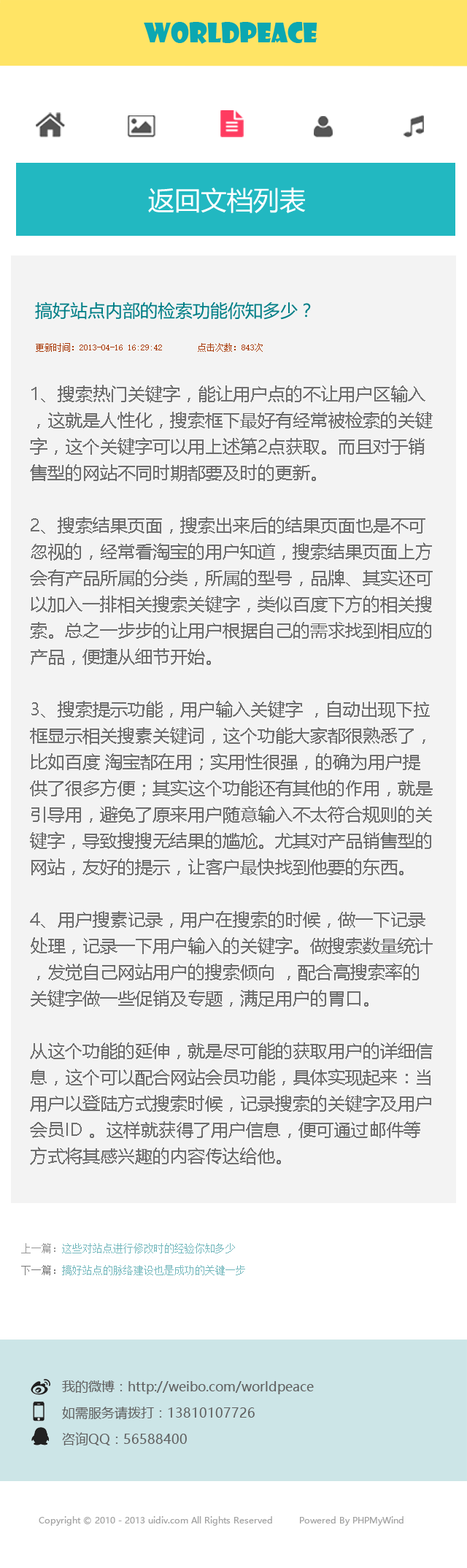
<style>
.page{position:relative;width:467px;height:1568px;background:#f3f3f3}
.page>*{position:absolute;margin:0}
.t1{font:26.3px "ShowcardGothic-Reg";color:#0ba7b1}
.t2{font:26.3px "MicrosoftYaHei";color:#ffffff}
.t3{font:17.5px "MicrosoftYaHei";color:#007e86}
.t4{font:8.8px "SimSun";color:#a93c0b}
.t5{font:17.5px/26.3px "MicrosoftYaHei";color:#6e6e6e}
.t6{font:10.2px/21.9px "SimSun";color:#72b7bc}
.t7{font:10.2px/21.9px "SimSun";color:#959595}
.t8{font:10.2px/21.9px "SimSun";color:#787878}
.t9{font:13.1px/26.3px "MicrosoftYaHei";color:#616161}
.t10{font:8.8px "MicrosoftYaHei";color:#a2a2a2}
</style>
<div class="page">
<p class="t1" style="left:144px;top:22px;width:174px;height:22px">worldpeace</p>
<p class="t2" style="left:148px;top:187px;width:158px;height:26px">返回文档列表</p>
<p class="t3" style="left:35px;top:301px;width:276px;height:19px">搞好站点内部的检索功能你知多少？</p>
<p class="t4" style="left:36px;top:343px;width:227px;height:9px">更新时间：2013-04-16 16:29:42        点击次数：843次</p>
<p class="t5" style="left:30px;top:385px;width:403px;height:780px">1、搜索热门关键字，能让用户点的不让用户区输入，这就是人性化，搜索框下最好有经常被检索的关键字，这个关键字可以用上述第2点获取。而且对于销售型的网站不同时期都要及时的更新。<br><br>2、搜索结果页面，搜索出来后的结果页面也是不可忽视的，经常看淘宝的用户知道，搜索结果页面上方会有产品所属的分类，所属的型号，品牌、其实还可以加入一排相关搜索关键字，类似百度下方的相关搜索。总之一步步的让用户根据自己的需求找到相应的产品，便捷从细节开始。<br><br>3、搜索提示功能，用户输入关键字 ，自动出现下拉框显示相关搜素关键词，这个功能大家都很熟悉了，比如百度 淘宝都在用；实用性很强，的确为用户提供了很多方便；其实这个功能还有其他的作用，就是引导用，避免了原来用户随意输入不太符合规则的关键字，导致搜搜无结果的尴尬。尤其对产品销售型的网站，友好的提示，让客户最快找到他要的东西。<br><br>4、用户搜素记录，用户在搜索的时候，做一下记录处理，记录一下用户输入的关键字。做搜索数量统计，发觉自己网站用户的搜索倾向 ，配合高搜索率的关键字做一些促销及专题，满足用户的胃口。<br><br>从这个功能的延伸，就是尽可能的获取用户的详细信息，这个可以配合网站会员功能，具体实现起来：当用户以登陆方式搜索时候，记录搜索的关键字及用户会员ID 。这样就获得了用户信息，便可通过邮件等方式将其感兴趣的内容传达给他。</p>
<p class="t6" style="left:21px;top:1243px;width:224px;height:32px"><span class="t7">上一篇：</span>这些对站点进行修改时的经验你知多少<br><span class="t8">下一篇：</span>搞好站点的脉络建设也是成功的关键一步</p>
<p class="t9" style="left:62px;top:1380px;width:252px;height:65px">我的微博：http://weibo.com/worldpeace            <br>如需服务请拨打：13810107726        <br>咨询QQ：56588400</p>
<p class="t10" style="left:39px;top:1516px;width:365px;height:10px">Copyright © 2010 - 2013 uidiv.com All Rights Reserved         Powered By PHPMyWind</p>
</div>
